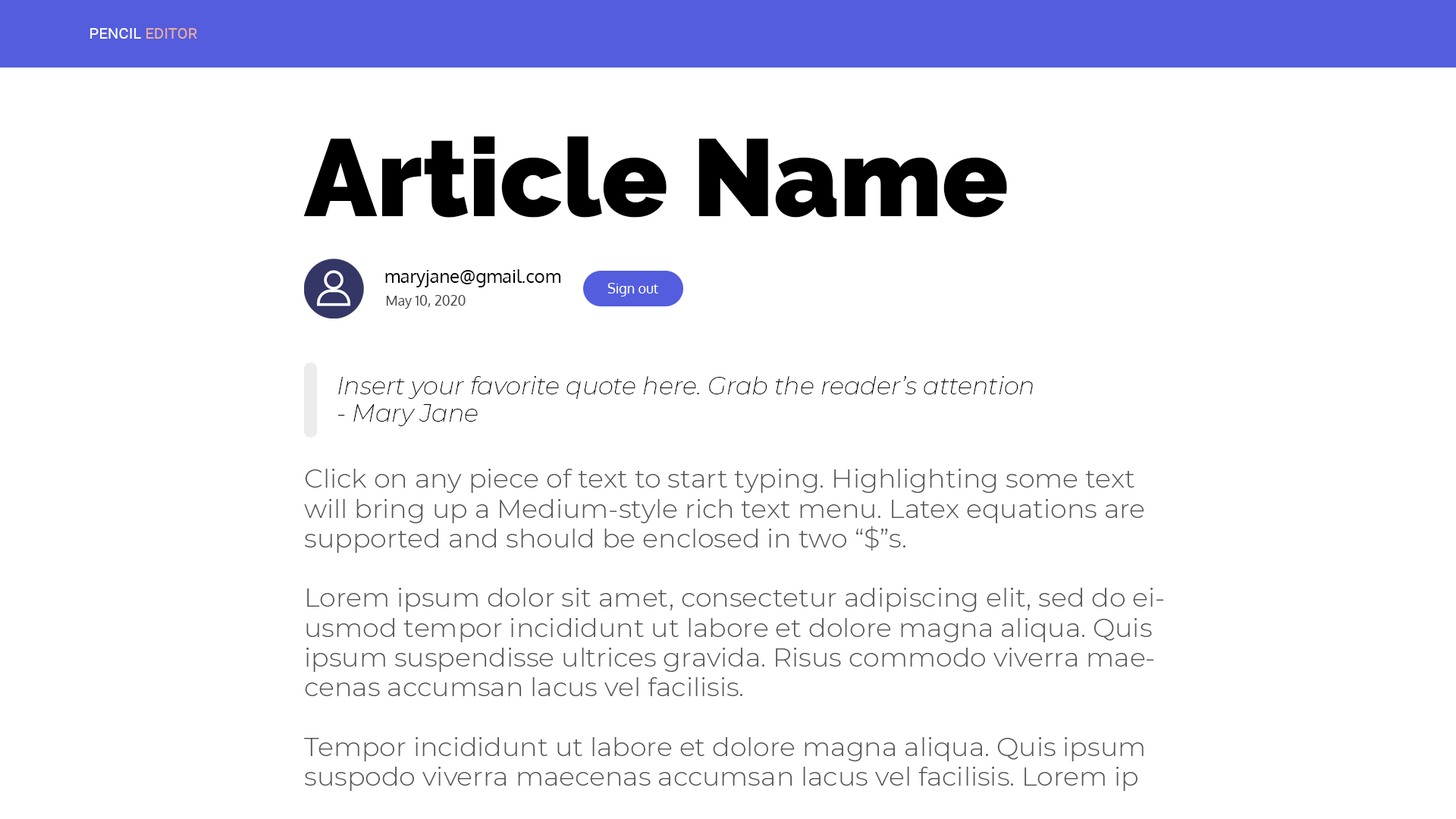
<style>
.page{position:relative;width:1456px;height:819px;background:#ffffff}
.page>*{position:absolute;margin:0}
.t1{font:15.5px "Roboto-Regular";color:#ffffff}
.t2{font:15.5px "Roboto-Regular";color:#ebad9d}
.t3{font:109.2px "Raleway-Black";color:#000000}
.t4{font:18.2px "Oxygen-Regular";color:#000000}
.t5{font:13.6px "Oxygen-Regular";color:#ffffff}
.t6{font:13.6px "Oxygen-Regular";color:#434343}
.t7{font:24.3px/27.3px "Montserrat-ExtraLightItalic";color:#000000}
.t8{font:26.5px/29.8px "Montserrat-Light";color:#545454}
</style>
<div class="page">
<p class="t1" style="left:90px;top:28px;width:107px;height:11px">PENCIL <span class="t2">EDITOR</span></p>
<p class="t3" style="left:303px;top:136px;width:704px;height:82px">Article Name</p>
<p class="t4" style="left:385px;top:269px;width:176px;height:18px">maryjane@gmail.com</p>
<p class="t5" style="left:607px;top:283px;width:51px;height:14px">Sign out</p>
<p class="t6" style="left:386px;top:295px;width:80px;height:14px">May 10, 2020</p>
<p class="t7" style="left:337px;top:376px;width:696px;height:50px">Insert your favorite quote here. Grab the reader’s attention - Mary Jane</p>
<p class="t8" style="left:304px;top:469px;width:860px;height:322px">Click on any piece of text to start typing. Highlighting some text will bring up a Medium-style rich text menu. Latex equations are supported and should be enclosed in two “$”s.<br><br>Lorem ipsum dolor sit amet, consectetur adipiscing elit, sed do eiusmod tempor incididunt ut labore et dolore magna aliqua. Quis ipsum suspendisse ultrices gravida. Risus commodo viverra maecenas accumsan lacus vel facilisis.<br><br>Tempor incididunt ut labore et dolore magna aliqua. Quis ipsum suspodo viverra maecenas accumsan lacus vel facilisis. Lorem ip<br><br>sum dolor sit amet, consectetur adipiscing elit, sed do eiusmod tempor incididunt ut labore et dolore magna aliqua. Quis ipsum suspendisse ultrices gravida. Risus commodo viverra maecenas accumsan lacus vel facilisis.</p>
</div>
